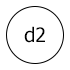
<style>
.page{position:relative;width:70px;height:70px;background:#ffffff}
.page>*{position:absolute;margin:0}
.t1{font:20px "Tahoma";color:#000000}
</style>
<div class="page">
<p class="t1" style="left:24px;top:26px;width:21px;height:17px">d2</p>
</div>
